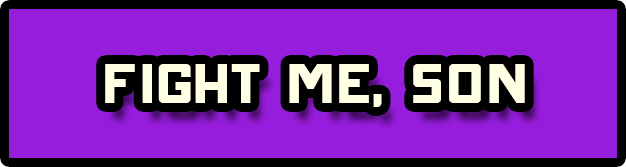
<style>
.page{position:relative;width:626px;height:167px;background:#971ddd}
.page>*{position:absolute;margin:0}
.t1{font:90px "ONRAMP";color:#ffffe3}
</style>
<div class="page">
<p class="t1" style="left:105px;top:64px;width:420px;height:43px">Fight me, son</p>
</div>
